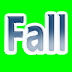
<style>
.page{position:relative;width:72px;height:72px;background:#00ff00}
.page>*{position:absolute;margin:0}
.t1{font:49.7px "Ebrima-Bold";scale:0.77 1}
</style>
<div class="page">
<p class="t1" style="left:7px;top:14px;width:58px;height:38px">Fall</p>
</div>
